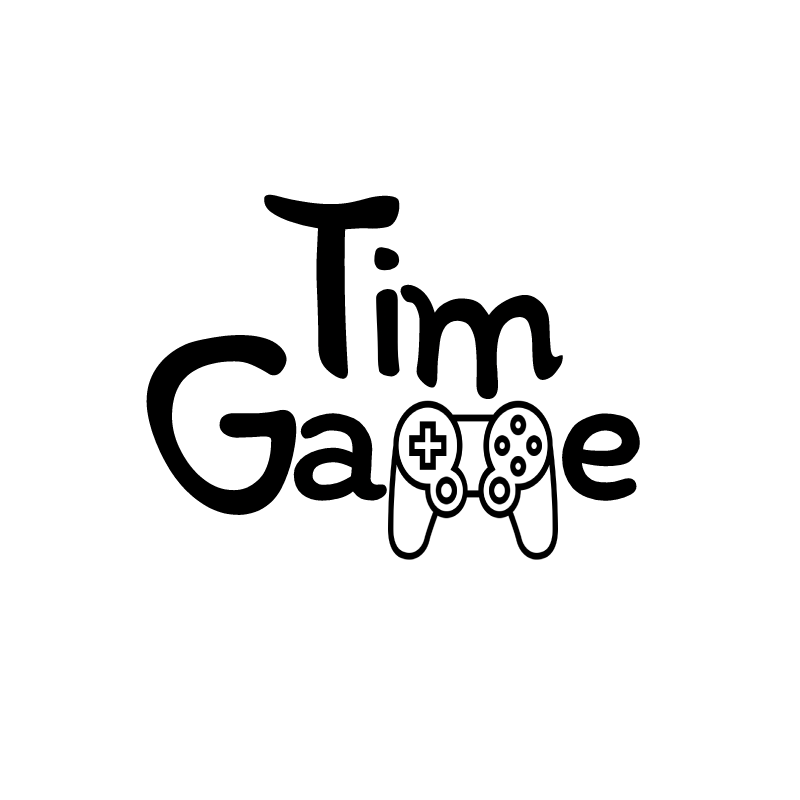
<style>
.page{position:relative;width:800px;height:800px;background:#ffffff}
.page>*{position:absolute;margin:0}
.t1{font:250px "Itim-Regular";color:#000000}
.t2{font:200px "Itim-Regular";color:#000000}
</style>
<div class="page">
<p class="t1" style="left:264px;top:194px;width:136px;height:186px">T</p>
<p class="t2" style="left:374px;top:247px;width:26px;height:130px">i</p>
<p class="t2" style="left:400px;top:284px;width:163px;height:116px">m</p>
<p class="t1" style="left:146px;top:334px;width:151px;height:182px">G</p>
<p class="t2" style="left:293px;top:413px;width:94px;height:88px">a</p>
<p class="t2" style="left:562px;top:413px;width:78px;height:88px">e</p>
</div>
